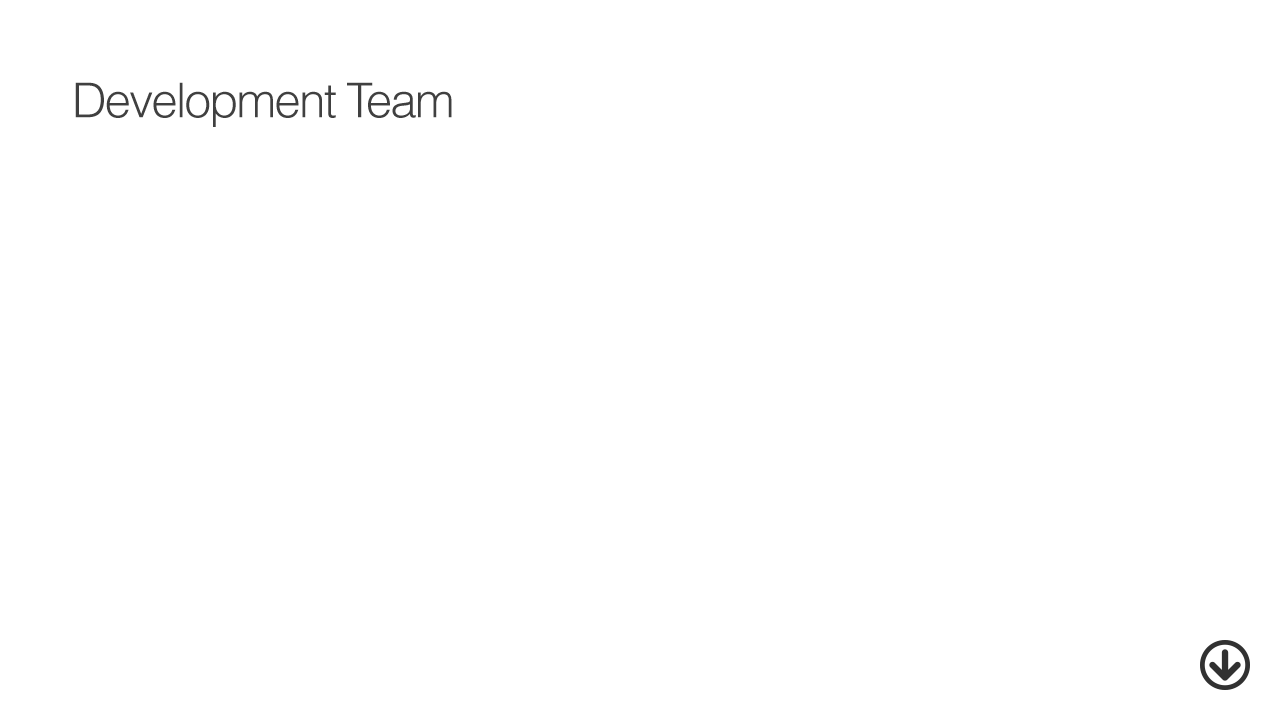
<style>
.page{position:relative;width:1280px;height:720px;background:#ffffff}
.page>*{position:absolute;margin:0}
.t1{font:48px "Helvetica-Light";letter-spacing:-0.04em;color:#404040}
</style>
<div class="page">
<p class="t1" style="left:75px;top:82px;width:377px;height:45px">Development Team</p>
</div>
